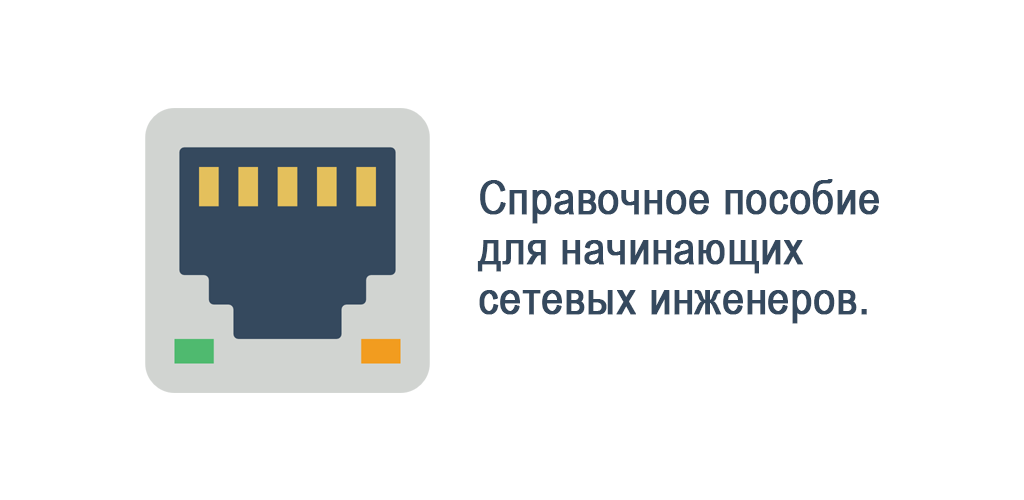
<style>
.page{position:relative;width:1024px;height:500px;background:#ffffff}
.page>*{position:absolute;margin:0}
.t1{font:47.4px/50px "ArialNarrow";color:#35495e;font-weight:bold}
</style>
<div class="page">
<p class="t1" style="left:477px;top:179px;width:402px;height:145px">Справочное пособие<br>для начинающих<br>сетевых инженеров.</p>
</div>
